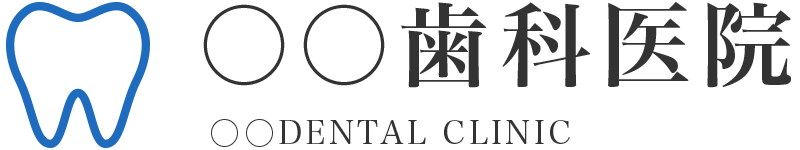
<style>
.page{position:relative;width:800px;height:150px;background:#ffffff}
.page>*{position:absolute;margin:0}
.t1{font:91.8px "HiraMinProN-W6";letter-spacing:0.1em;color:#333333}
.t2{font:32px "HiraMinPro-W3";letter-spacing:0.1em;color:#333333}
</style>
<div class="page">
<p class="t1" style="left:203px;top:1px;width:588px;height:87px">○○歯科医院</p>
<p class="t2" style="left:211px;top:119px;width:359px;height:28px">○○DENTAL CLINIC</p>
</div>
